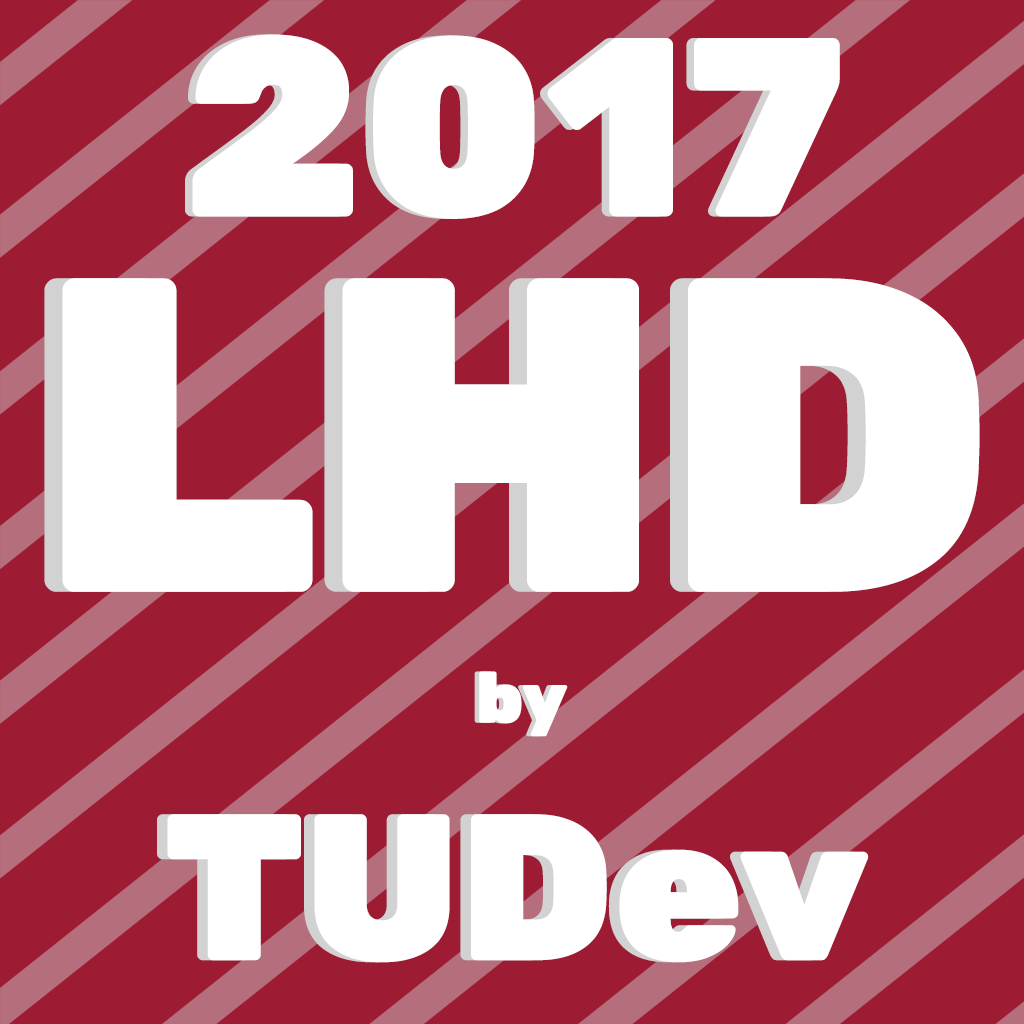
<style>
.page{position:relative;width:1024px;height:1024px;background:#9e1b34}
.page>*{position:absolute;margin:0}
.t1{font:254.4px "Rubik-Black";color:#ffffff}
.t2{font:447.5px "Rubik-Black";color:#ffffff}
.t3{font:71.7px "Rubik-Black";color:#ffffff}
.t4{font:208.1px "Rubik-Black";color:#ffffff}
</style>
<div class="page">
<p class="t1" style="left:185px;top:34px;width:648px;height:185px">2017</p>
<p class="t1" style="left:192px;top:34px;width:648px;height:185px">2017</p>
<p class="t2" style="left:44px;top:278px;width:918px;height:314px">LHD</p>
<p class="t2" style="left:62px;top:278px;width:918px;height:314px">LHD</p>
<p class="t3" style="left:474px;top:671px;width:89px;height:66px">by</p>
<p class="t3" style="left:479px;top:671px;width:89px;height:66px">by</p>
<p class="t4" style="left:157px;top:814px;width:701px;height:149px">TUDev</p>
<p class="t4" style="left:167px;top:814px;width:702px;height:149px">TUDev</p>
</div>
